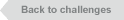
<style>
.page{position:relative;width:124px;height:20px;background:#dcdddd}
.page>*{position:absolute;margin:0}
.t1{font:10px "Arial-BoldMT";color:#818485}
</style>
<div class="page">
<p class="t1" style="left:21px;top:5px;width:90px;height:10px">Back to challenges</p>
</div>
